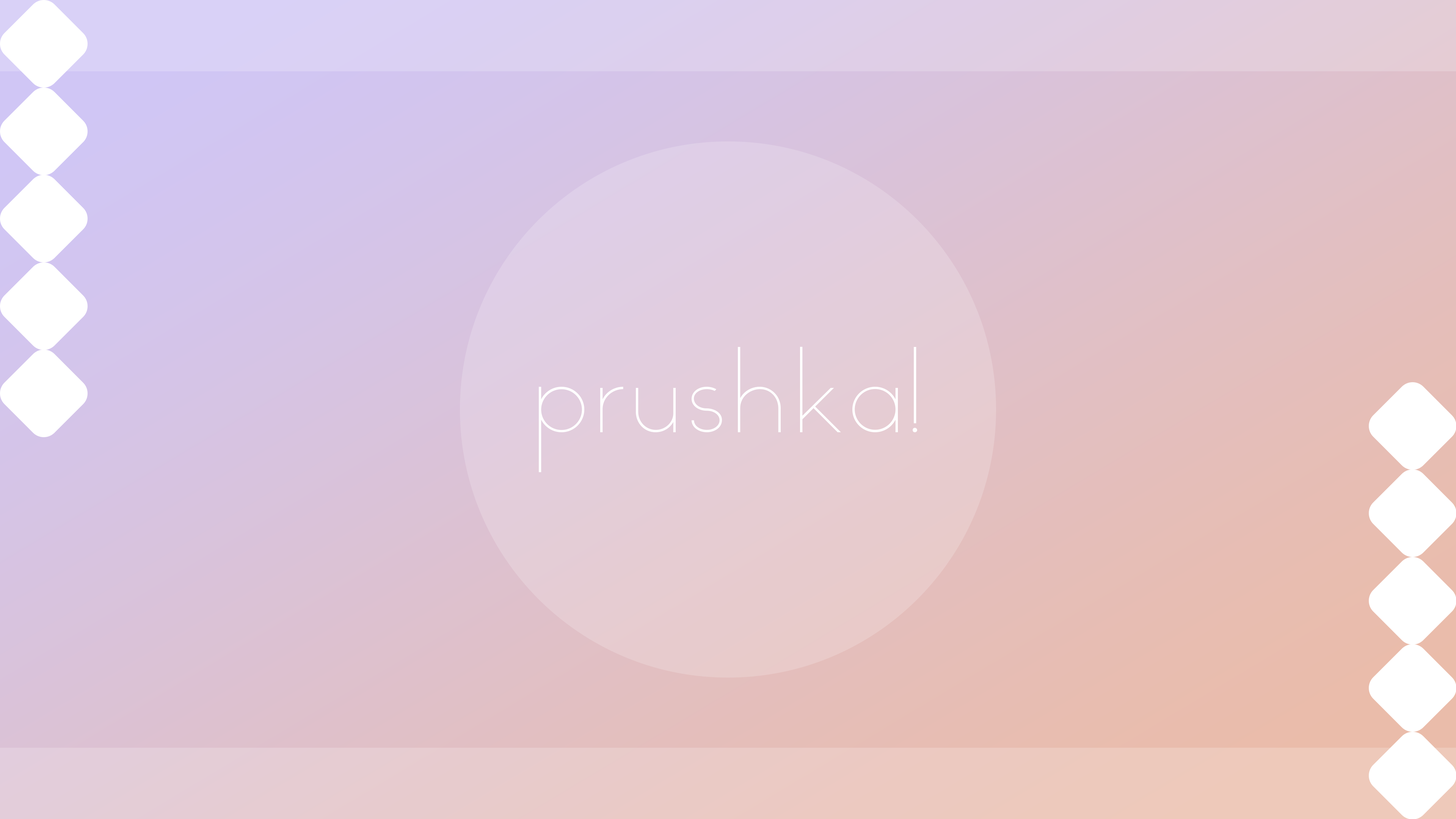
<style>
.page{position:relative;width:1456px;height:819px}
.page>*{position:absolute;margin:0}
.t1{font:113.7px "BigJohnPRO-Light";color:#ffffff}
</style>
<div class="page">
<p class="t1" style="left:539px;top:347px;width:378px;height:125px">prushka!</p>
</div>
